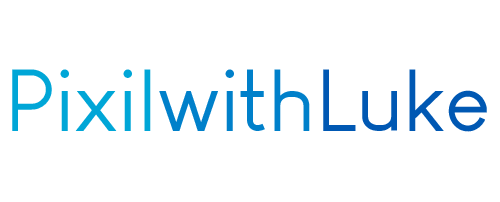
<style>
.page{position:relative;width:500px;height:202px;background:#ffffff}
.page>*{position:absolute;margin:0}
.t1{font:86px "LouisGeorgeCafe";color:#00a6d7}
.t2{font:86px "LouisGeorgeCafe";color:#0080ca}
.t3{font:86px "LouisGeorgeCafe";color:#0058b3}
</style>
<div class="page">
<p class="t1" style="left:12px;top:69px;width:475px;height:63px">Pixil<span class="t2">with</span><span class="t3">Luke</span></p>
</div>
